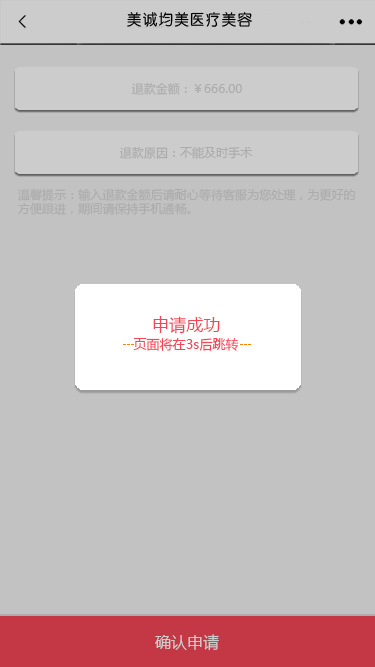
<style>
.page{position:relative;width:375px;height:667px;background:#c2c2c2}
.page>*{position:absolute;margin:0}
.t1{font:12px "MicrosoftYaHei";letter-spacing:0.005em;color:#acacac}
.t2{font:12px/14px "MicrosoftYaHei";letter-spacing:0.005em;color:#acacac}
.t3{font:17.1px "MicrosoftYaHei";letter-spacing:0.005em;color:#f54556}
.t4{font:13px "MicrosoftYaHei";letter-spacing:0.005em;color:#f54556}
.t5{font:16px "MicrosoftYaHei";letter-spacing:0.005em;color:#cccccc}
</style>
<div class="page">
<p class="t1" style="left:131px;top:82px;width:111px;height:13px">退款金额：￥666.00</p>
<p class="t1" style="left:119px;top:146px;width:134px;height:13px">退款原因：不能及时手术</p>
<p class="t2" style="left:18px;top:188px;width:337px;height:27px">温馨提示：输入退款金额后请耐心等待客服为您处理，为更好的<br>方便跟进，期间请保持手机通畅。</p>
<p class="t3" style="left:153px;top:316px;width:67px;height:18px">申请成功</p>
<p class="t4" style="left:133px;top:338px;width:106px;height:13px">页面将在3s后跳转</p>
<p class="t5" style="left:155px;top:634px;width:64px;height:17px">确认申请</p>
</div>
